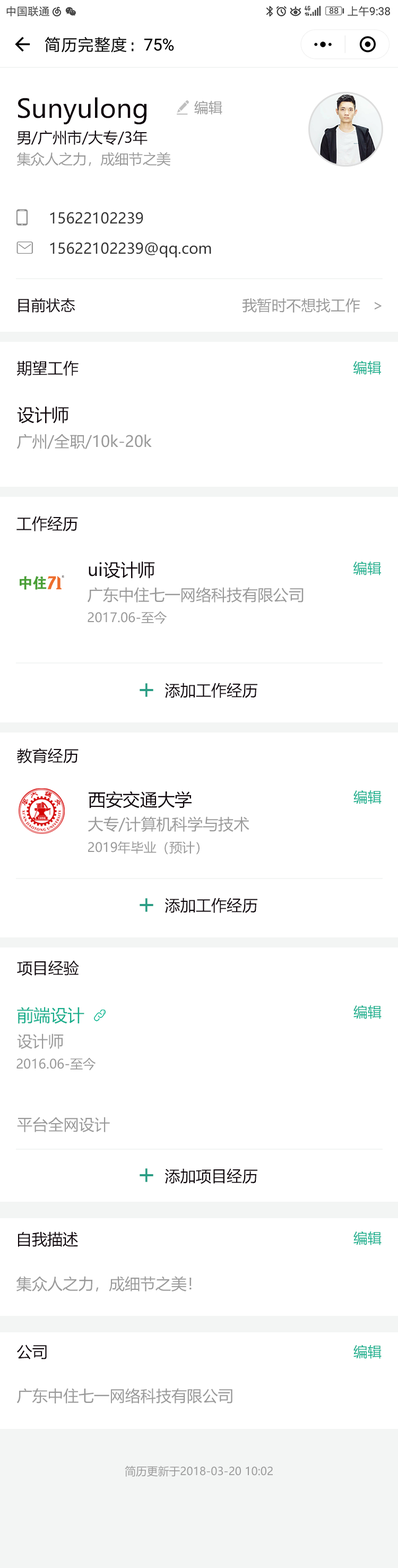
<style>
.page{position:relative;width:398px;height:1568px;background:#ffffff}
.page>*{position:absolute;margin:0}
.t1{font:25.8px "MicrosoftYaHei";color:#000000}
.t2{font:14px "MicrosoftYaHei";color:#9a9a9a}
.t3{font:14.7px "MicrosoftYaHei";color:#000000}
.t4{font:14.7px "MicrosoftYaHei";color:#333333}
.t5{font:14.7px "MicrosoftYaHei";color:#999999}
.t6{font:15.5px "MicrosoftYaHei";color:#000000}
.t7{font:14px "MicrosoftYaHei";color:#16ae8c}
.t8{font:17.3px "MicrosoftYaHei";color:#000000}
.t9{font:15.5px "MicrosoftYaHei";color:#999999}
.t10{font:12.9px "MicrosoftYaHei";color:#999999}
.t11{font:27px "MicrosoftYaHei";color:#2b9e85}
.t12{font:17px "MicrosoftYaHei";color:#16ae8c}
.t13{font:11.1px "MicrosoftYaHei";color:#999999}
</style>
<div class="page">
<p class="t1" style="left:18px;top:97px;width:129px;height:28px">Sunyulong</p>
<p class="t2" style="left:194px;top:100px;width:28px;height:15px">编辑</p>
<p class="t3" style="left:17px;top:130px;width:131px;height:15px">男/广州市/大专/3年</p>
<p class="t2" style="left:16px;top:152px;width:154px;height:14px">集众人之力，成细节之美</p>
<p class="t4" style="left:50px;top:212px;width:93px;height:12px">15622102239</p>
<p class="t4" style="left:50px;top:242px;width:161px;height:15px">15622102239@qq.com</p>
<p class="t3" style="left:18px;top:298px;width:57px;height:15px">目前状态</p>
<p class="t5" style="left:242px;top:298px;width:118px;height:15px">我暂时不想找工作</p>
<p class="t5" style="left:375px;top:302px;width:7px;height:8px">&gt;</p>
<p class="t6" style="left:16px;top:360px;width:63px;height:16px">期望工作</p>
<p class="t7" style="left:353px;top:360px;width:29px;height:15px">编辑</p>
<p class="t8" style="left:17px;top:406px;width:52px;height:18px">设计师</p>
<p class="t9" style="left:16px;top:434px;width:136px;height:15px">广州/全职/10k-20k</p>
<p class="t6" style="left:16px;top:516px;width:62px;height:15px">工作经历</p>
<p class="t8" style="left:89px;top:561px;width:66px;height:18px">ui设计师</p>
<p class="t7" style="left:353px;top:561px;width:29px;height:14px">编辑</p>
<p class="t9" style="left:87px;top:587px;width:217px;height:15px">广东中住七一网络科技有限公司</p>
<p class="t10" style="left:88px;top:611px;width:79px;height:13px">2017.06-至今</p>
<p class="t11" style="left:140px;top:683px;width:13px;height:14px">+</p>
<p class="t6" style="left:165px;top:683px;width:92px;height:15px">添加工作经历</p>
<p class="t6" style="left:17px;top:748px;width:62px;height:15px">教育经历</p>
<p class="t8" style="left:89px;top:791px;width:103px;height:17px">西安交通大学</p>
<p class="t7" style="left:354px;top:790px;width:28px;height:14px">编辑</p>
<p class="t9" style="left:88px;top:816px;width:161px;height:16px">大专/计算机科学与技术</p>
<p class="t10" style="left:88px;top:841px;width:112px;height:14px">2019年毕业（预计）</p>
<p class="t11" style="left:140px;top:898px;width:13px;height:14px">+</p>
<p class="t6" style="left:165px;top:898px;width:92px;height:15px">添加工作经历</p>
<p class="t6" style="left:17px;top:960px;width:62px;height:16px">项目经验</p>
<p class="t12" style="left:17px;top:1007px;width:67px;height:17px">前端设计</p>
<p class="t7" style="left:354px;top:1005px;width:28px;height:14px">编辑</p>
<p class="t9" style="left:17px;top:1033px;width:47px;height:16px">设计师</p>
<p class="t10" style="left:16px;top:1058px;width:80px;height:13px">2016.06-至今</p>
<p class="t9" style="left:17px;top:1117px;width:93px;height:15px">平台全网设计</p>
<p class="t11" style="left:140px;top:1168px;width:13px;height:14px">+</p>
<p class="t6" style="left:165px;top:1168px;width:92px;height:16px">添加项目经历</p>
<p class="t6" style="left:18px;top:1231px;width:60px;height:16px">自我描述</p>
<p class="t7" style="left:354px;top:1231px;width:28px;height:14px">编辑</p>
<p class="t9" style="left:16px;top:1276px;width:176px;height:15px">集众人之力，成细节之美！</p>
<p class="t6" style="left:17px;top:1345px;width:30px;height:14px">公司</p>
<p class="t7" style="left:354px;top:1345px;width:28px;height:14px">编辑</p>
<p class="t9" style="left:16px;top:1388px;width:216px;height:15px">广东中住七一网络科技有限公司</p>
<p class="t13" style="left:125px;top:1466px;width:148px;height:11px">简历更新于2018-03-20 10:02</p>
</div>
